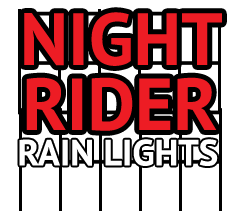
<style>
.page{position:relative;width:230px;height:220px;background:#ffffff}
.page>*{position:absolute;margin:0}
.t1{font:73.2px/65.1px "PTSans-Bold";color:#ed1c24}
.t2{font:36.4px "PTSans-Bold";color:#ffffff}
</style>
<div class="page">
<p class="t1" style="left:24px;top:12px;width:198px;height:119px;text-align:center">NIGHT<br>RIDER</p>
<p class="t2" style="left:19px;top:139px;width:199px;height:27px">RAIN LIGHTS</p>
</div>
